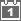
<style>
.page{position:relative;width:21px;height:21px;background:#696969}
.page>*{position:absolute;margin:0}
.t1{font:11px "Arial-Black";color:#ffffff}
</style>
<div class="page">
<p class="t1" style="left:7px;top:8px;width:6px;height:8px">1</p>
</div>
